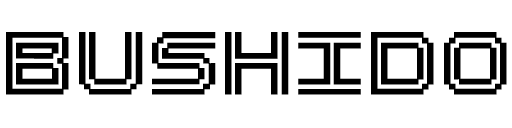
<style>
.page{position:relative;width:512px;height:128px;background:#ffffff}
.page>*{position:absolute;margin:0}
.t1{font:84.1px "PFUniform-Regular";color:#000000;font-weight:bold}
</style>
<div class="page">
<p class="t1" style="left:6px;top:32px;width:501px;height:63px">BUSHIDO</p>
</div>
